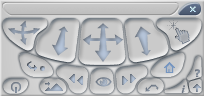
<style>
.page{position:relative;width:204px;height:96px}
.page>*{position:absolute;margin:0}
.t1{font:9px "Silkscreen";letter-spacing:-0.01em;color:#cdf3ff}
.t2{font:10px "Tahoma-Bold";letter-spacing:-0.01em;color:#7c8695}
.t3{font:11px "TimesNewRomanPS-BoldItalicMT";letter-spacing:-0.01em;color:#707986}
</style>
<div class="page">
<p class="t1" style="left:190px;top:6px;width:6px;height:6px">X</p>
<p class="t2" style="left:195px;top:69px;width:5px;height:8px">?</p>
<p class="t3" style="left:181px;top:85px;width:4px;height:8px">i</p>
</div>
